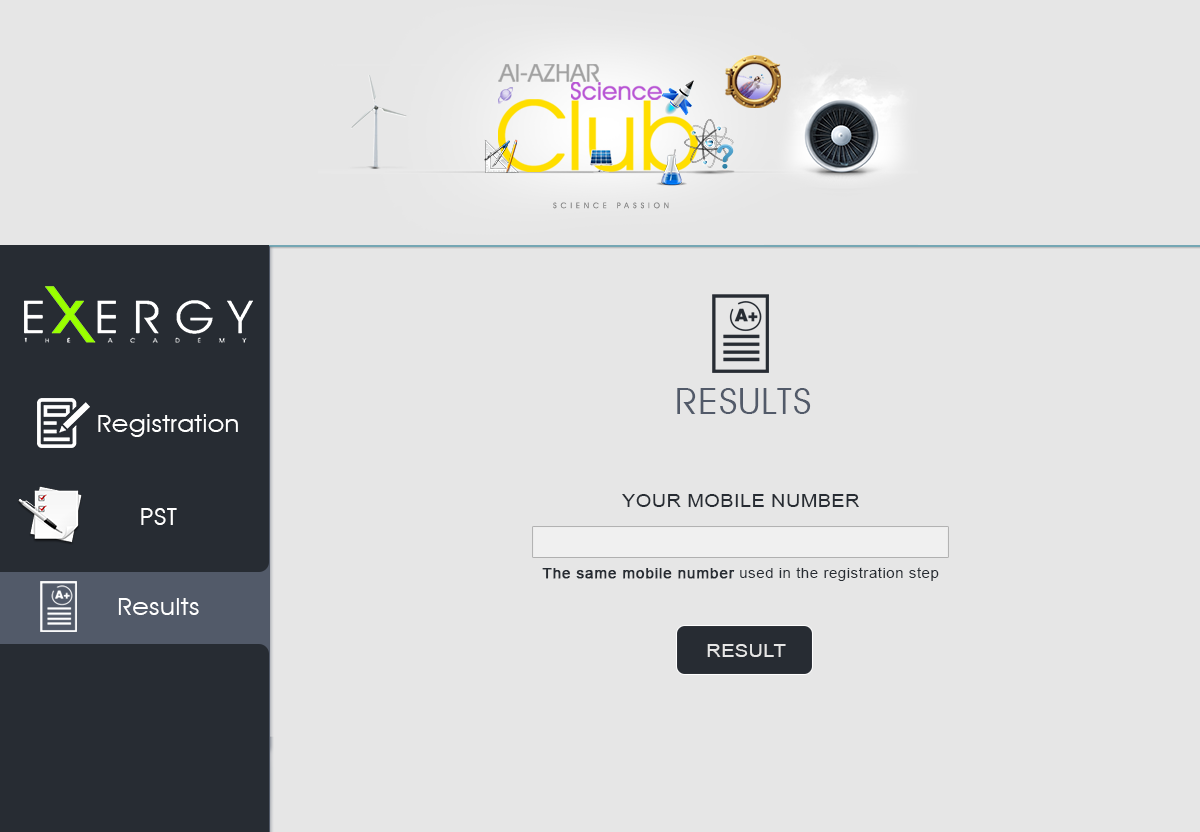
<style>
.page{position:relative;width:1200px;height:832px;background:#e6e6e6}
.page>*{position:absolute;margin:0}
.t1{font:36px "AvantGardeITCbyBT-Book";letter-spacing:0.025em;color:#525a69;text-transform:uppercase;scale:1.1 1}
.t2{font:24px "AvantGardeITCbyBT-Book";letter-spacing:0.025em;color:#ffffff;scale:1.1 1}
.t3{font:18px "ArialMT";letter-spacing:0.025em;color:#272c33;scale:1.1 1}
.t4{font:14px "ArialMT";letter-spacing:0.025em;color:#272c33;scale:1.1 1}
.t5{font:14px "ArialMT";letter-spacing:0.025em;color:#272c33;font-weight:bold;scale:1.1 1}
.t6{font:18px "ArialMT";letter-spacing:0.025em;color:#e6e6e6;scale:1.1 1}
</style>
<div class="page">
<p class="t1" style="left:677px;top:388px;width:134px;height:26px">RESULTS</p>
<p class="t2" style="left:98px;top:414px;width:140px;height:23px">Registration</p>
<p class="t3" style="left:622px;top:494px;width:237px;height:13px">YOUR MOBILE NUMBER</p>
<p class="t2" style="left:141px;top:508px;width:36px;height:17px">PST</p>
<p class="t4" style="left:542px;top:567px;width:397px;height:14px"><span class="t5">The same mobile number</span> used in the registration step</p>
<p class="t2" style="left:118px;top:598px;width:81px;height:17px">Results</p>
<p class="t6" style="left:707px;top:644px;width:79px;height:13px">RESULT</p>
</div>
